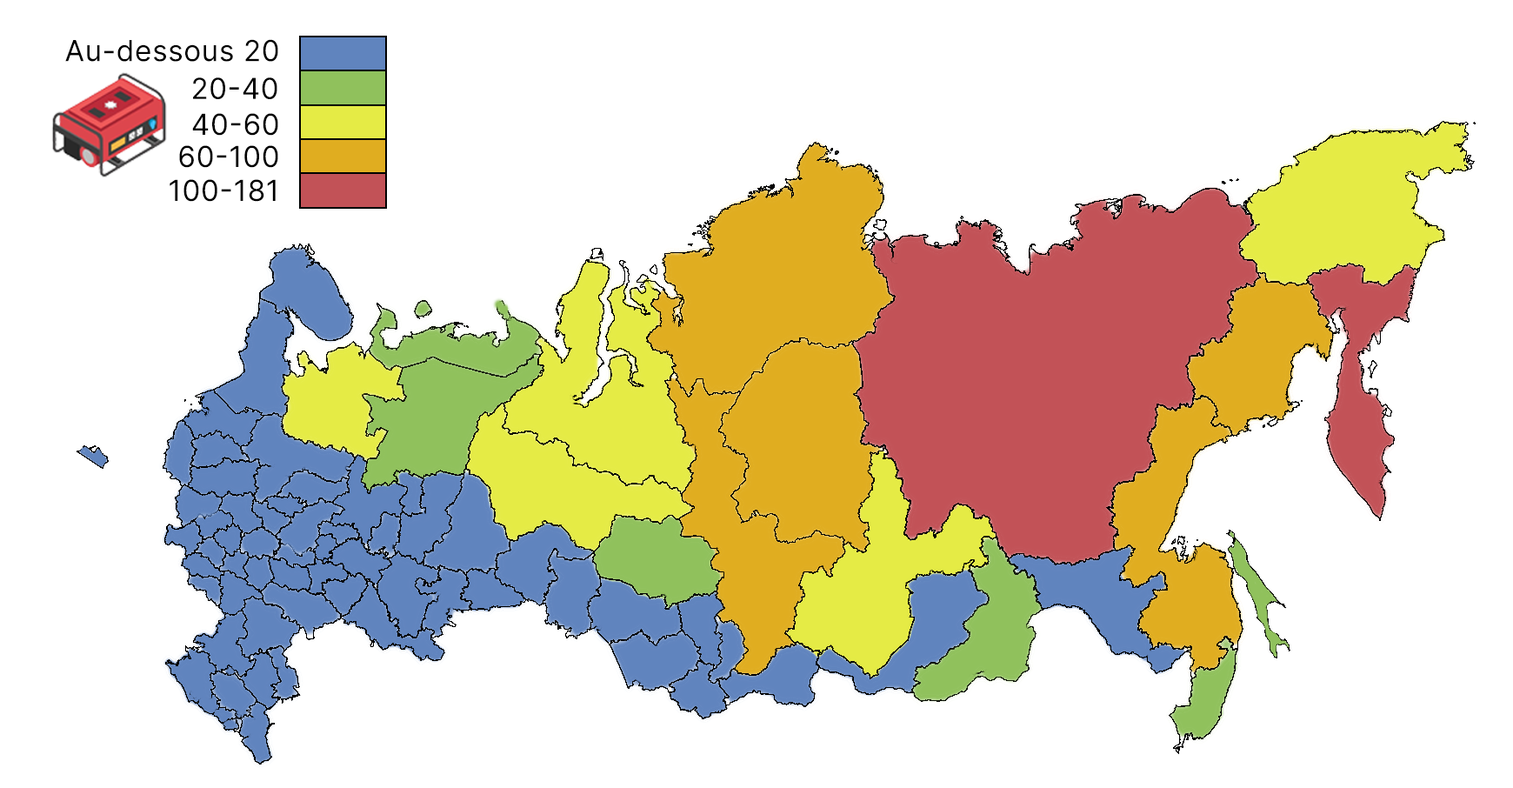
<style>
.page{position:relative;width:1513px;height:788px;background:#ffffff}
.page>*{position:absolute;margin:0}
.t1{font:29px "Inter-Regular";letter-spacing:0.02em;color:#000000}
</style>
<div class="page">
<p class="t1" style="left:65px;top:39px;width:213px;height:23px">Au-dessous 20</p>
<p class="t1" style="left:193px;top:77px;width:84px;height:22px">20-40</p>
<p class="t1" style="left:192px;top:113px;width:86px;height:23px">40-60</p>
<p class="t1" style="left:179px;top:145px;width:99px;height:23px">60-100</p>
<p class="t1" style="left:170px;top:179px;width:106px;height:23px">100-181</p>
</div>
